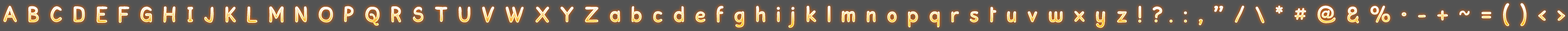
<style>
.page{position:relative;width:1568px;height:31px;background:#535353}
.page>*{position:absolute;margin:0}
.t1{font:20.2px "Kronika";letter-spacing:0.6em;scale:0.88 1}
</style>
<div class="page">
<p class="t1" style="left:3px;top:3px;width:1562px;height:25px">ABCDEFGHIJKLMNOPQRSTUVWXYZabcdefghijklmnopqrstuvwxyz!?.:,”/\*#@&amp;%•-+~=()&lt;&gt;</p>
</div>
